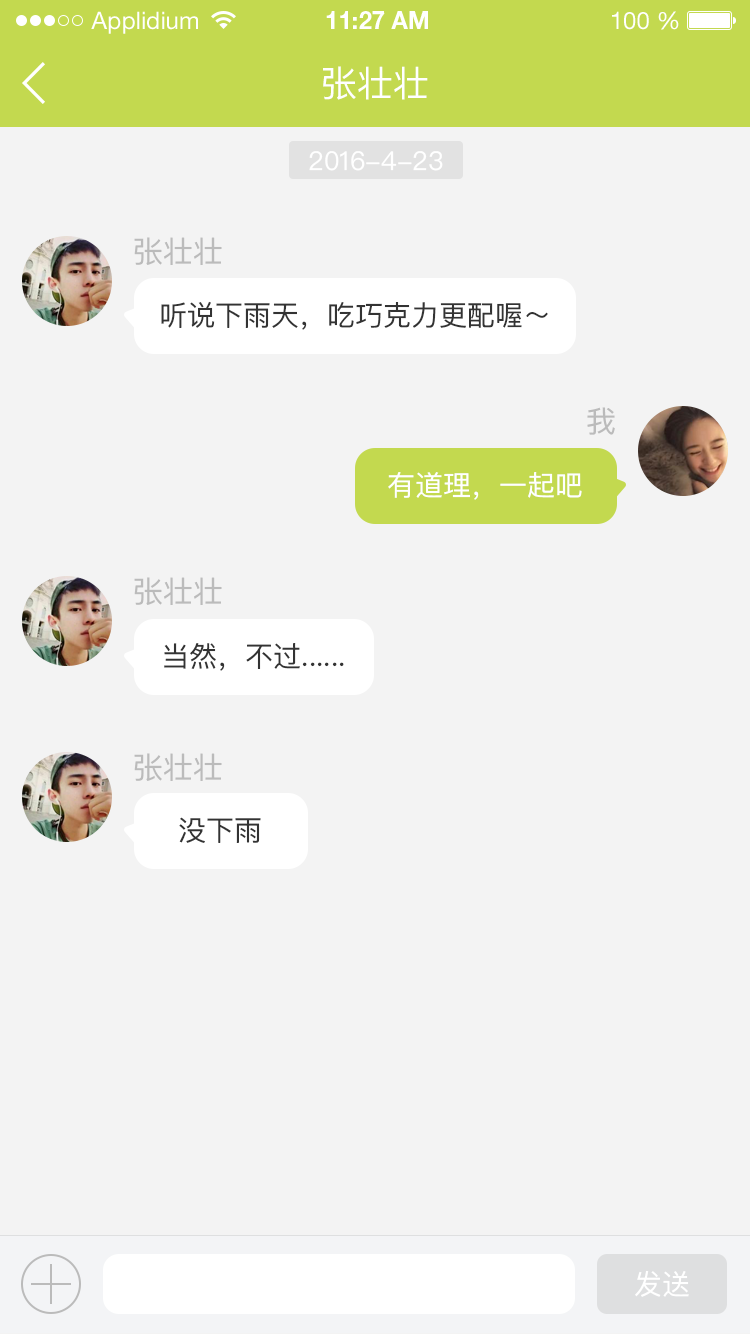
<style>
.page{position:relative;width:750px;height:1334px;background:#f3f3f3}
.page>*{position:absolute;margin:0}
.t1{font:24px "HelveticaNeueLTStd-Roman";color:#ffffff}
.t2{font:24px "HelveticaNeueLTStd-Bd";color:#ffffff}
.t3{font:36px "PingFangSC-Regular";color:#ffffff}
.t4{font:26px "PingFangSC-Regular";color:#ffffff}
.t5{font:30px "PingFangSC-Regular";color:#bbbbbb}
.t6{font:28px "PingFangSC-Regular";color:#333333}
.t7{font:28px "PingFangSC-Regular";color:#ffffff}
</style>
<div class="page">
<p class="t1" style="left:91px;top:11px;width:107px;height:23px">Applidium</p>
<p class="t2" style="left:326px;top:11px;width:102px;height:18px">11:27 AM</p>
<p class="t1" style="left:612px;top:11px;width:67px;height:19px">100 %</p>
<p class="t3" style="left:323px;top:66px;width:105px;height:34px">张壮壮</p>
<p class="t4" style="left:309px;top:151px;width:134px;height:20px">2016-4-23</p>
<p class="t5" style="left:134px;top:237px;width:88px;height:28px">张壮壮</p>
<p class="t6" style="left:161px;top:301px;width:387px;height:29px">听说下雨天，吃巧克力更配喔～</p>
<p class="t5" style="left:587px;top:407px;width:28px;height:28px">我</p>
<p class="t7" style="left:388px;top:472px;width:194px;height:28px">有道理，一起吧</p>
<p class="t5" style="left:134px;top:577px;width:88px;height:28px">张壮壮</p>
<p class="t6" style="left:164px;top:643px;width:180px;height:28px">当然，不过......</p>
<p class="t5" style="left:134px;top:753px;width:88px;height:28px">张壮壮</p>
<p class="t6" style="left:179px;top:817px;width:82px;height:26px">没下雨</p>
<p class="t7" style="left:635px;top:1270px;width:54px;height:27px">发送</p>
</div>
